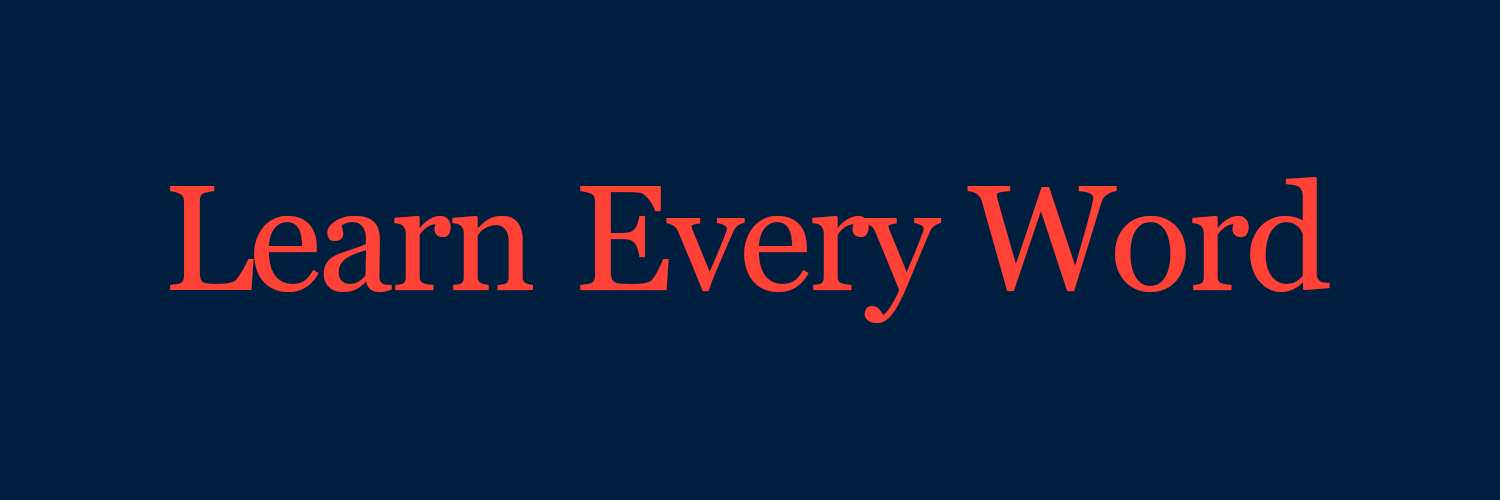
<style>
.page{position:relative;width:1500px;height:500px;background:#001f3f}
.page>*{position:absolute;margin:0}
.t1{font:150px "Georgia";letter-spacing:-0.025em;color:#ff4136}
</style>
<div class="page">
<p class="t1" style="left:170px;top:177px;width:1160px;height:146px">Learn Every Word</p>
</div>
